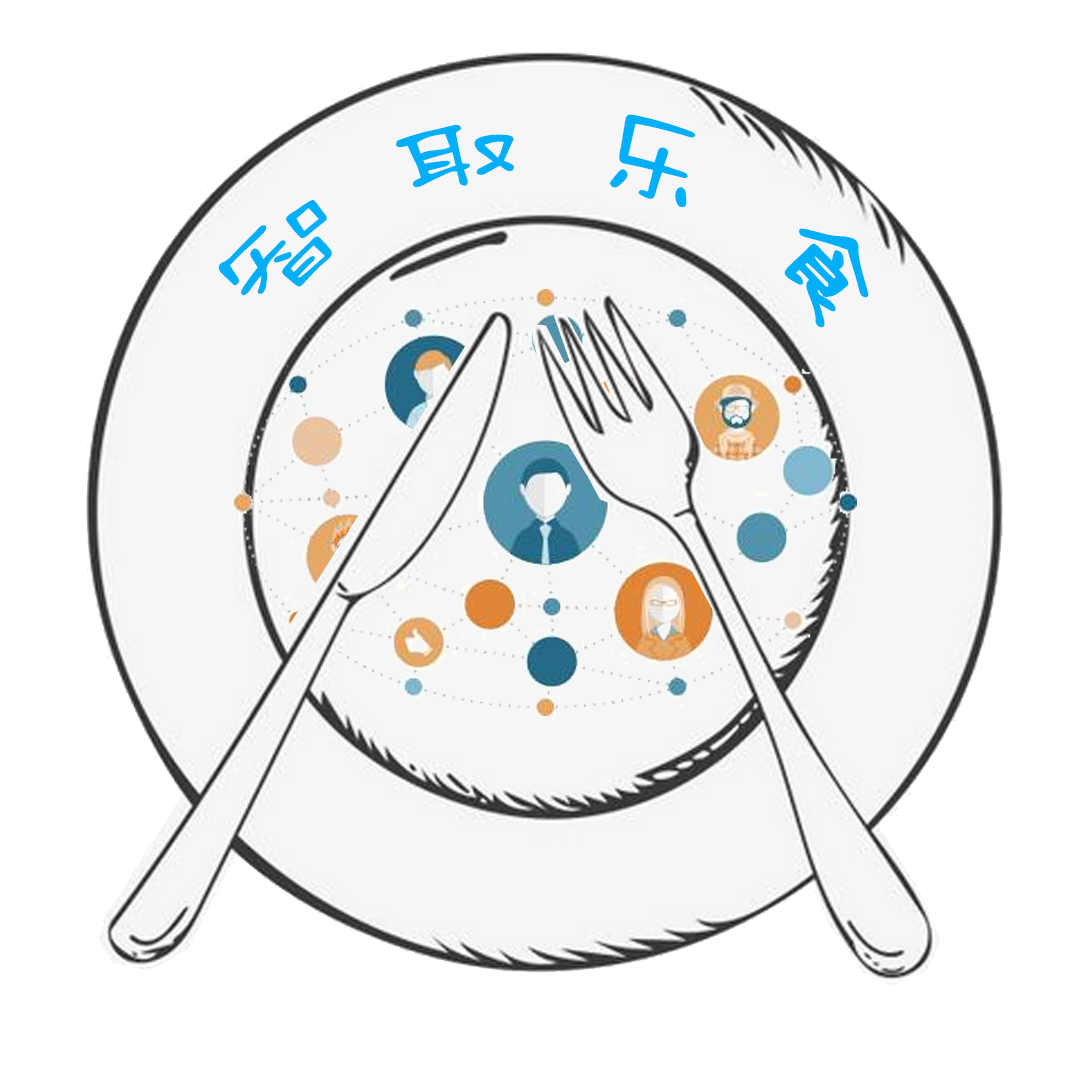
<style>
.page{position:relative;width:1080px;height:1080px;background:#ffffff}
.page>*{position:absolute;margin:0}
.t1{font:96px "HYLiLiTiW";letter-spacing:0.1em;color:#00aff8}
</style>
<div class="page">
<p class="t1" style="left:218px;top:114px;width:651px;height:214px;rotate:3deg">智 取 乐 食</p>
</div>
